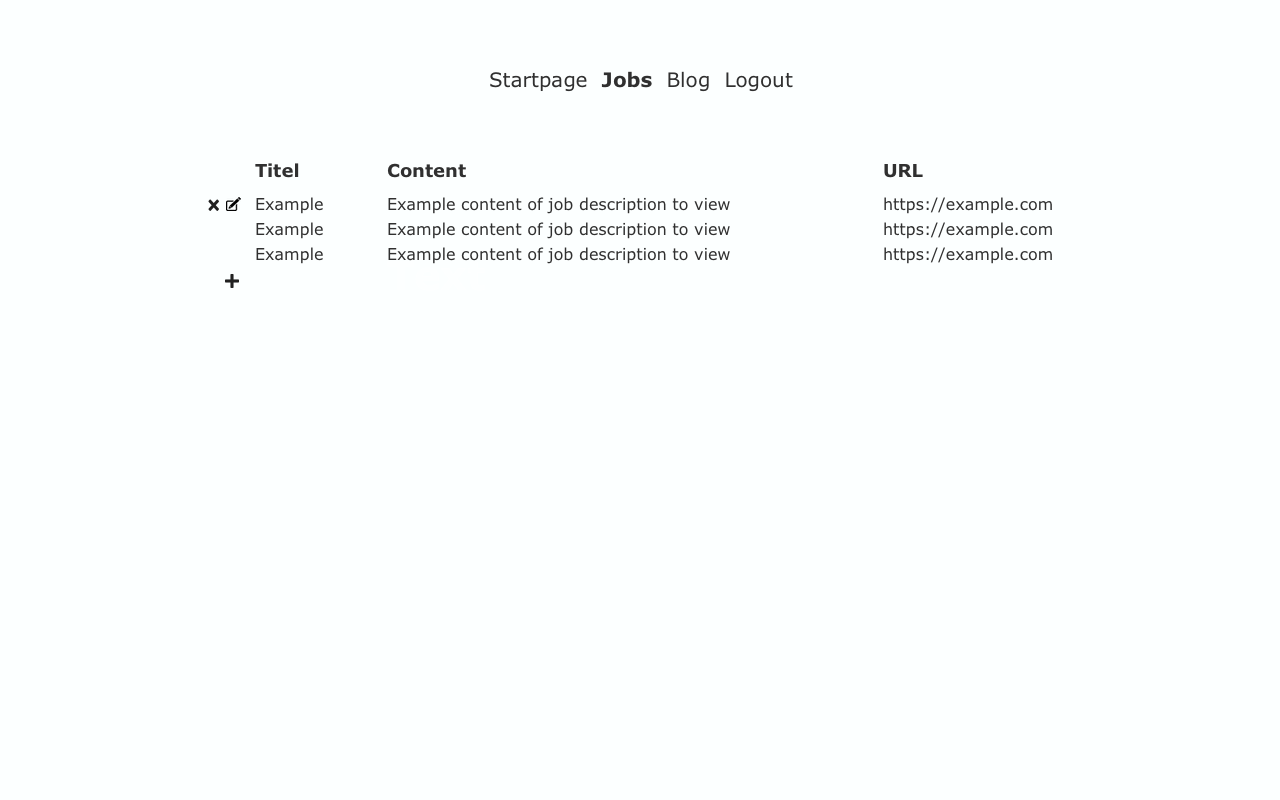
<style>
.page{position:relative;width:1280px;height:800px;background:#fcffff}
.page>*{position:absolute;margin:0}
.t1{font:20px "Verdana";color:#303030}
.t2{font:20px "Verdana-Bold";color:#303030}
.t3{font:18px "Verdana-Bold";color:#303030}
.t4{font:16px "Verdana";color:#303030}
</style>
<div class="page">
<p class="t1" style="left:490px;top:71px;width:303px;height:21px">Startpage  <span class="t2">Jobs</span>  Blog  Logout</p>
<p class="t3" style="left:255px;top:163px;width:44px;height:15px">Titel</p>
<p class="t3" style="left:387px;top:163px;width:79px;height:15px">Content</p>
<p class="t3" style="left:884px;top:164px;width:39px;height:14px">URL</p>
<p class="t4" style="left:256px;top:197px;width:67px;height:17px">Example</p>
<p class="t4" style="left:388px;top:197px;width:342px;height:17px">Example content of job description to view</p>
<p class="t4" style="left:884px;top:197px;width:168px;height:17px">https://example.com</p>
<p class="t4" style="left:256px;top:222px;width:67px;height:17px">Example</p>
<p class="t4" style="left:388px;top:222px;width:342px;height:17px">Example content of job description to view</p>
<p class="t4" style="left:884px;top:222px;width:168px;height:17px">https://example.com</p>
<p class="t4" style="left:256px;top:247px;width:67px;height:17px">Example</p>
<p class="t4" style="left:388px;top:247px;width:342px;height:17px">Example content of job description to view</p>
<p class="t4" style="left:884px;top:247px;width:168px;height:17px">https://example.com</p>
</div>
